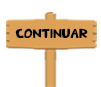
<style>
.page{position:relative;width:101px;height:87px;background:#ffffff}
.page>*{position:absolute;margin:0}
.t1{font:13.2px "SharkHeavyABC";color:#000000;scale:1.3 1}
</style>
<div class="page">
<p class="t1" style="left:15px;top:28px;width:73px;height:10px">CONTINUAR</p>
</div>
